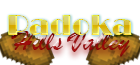
<style>
.page{position:relative;width:140px;height:65px;background:#ffffff}
.page>*{position:absolute;margin:0}
.t1{font:30px "Broadway"}
.t2{font:30px "BrushScriptMT"}
</style>
<div class="page">
<p class="t1" style="left:8px;top:15px;width:124px;height:20px">Padoka</p>
<p class="t1" style="left:8px;top:15px;width:124px;height:20px">Padoka</p>
<p class="t2" style="left:11px;top:31px;width:119px;height:26px">Hills Valley</p>
</div>
